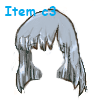
<style>
.page{position:relative;width:100px;height:100px;background:#ffffff}
.page>*{position:absolute;margin:0}
.t1{font:13.3px "ComicSansMS-Bold";color:#00aeef}
</style>
<div class="page">
<p class="t1" style="left:5px;top:6px;width:51px;height:10px">Item c3</p>
</div>
